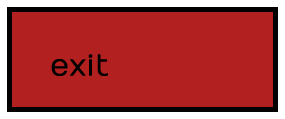
<style>
.page{position:relative;width:285px;height:119px;background:#b32020}
.page>*{position:absolute;margin:0}
.t1{font:30px "Numans-Regular";color:#000000}
</style>
<div class="page">
<p class="t1" style="left:51px;top:54px;width:57px;height:22px">exit</p>
</div>
